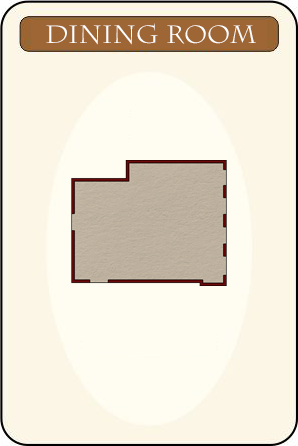
<style>
.page{position:relative;width:298px;height:446px;background:#fcf6e6}
.page>*{position:absolute;margin:0}
.t1{font:25px "CharlemagneStd-Regular";color:#ffffff}
</style>
<div class="page">
<p class="t1" style="left:46px;top:23px;width:210px;height:22px">Dining Room</p>
</div>
